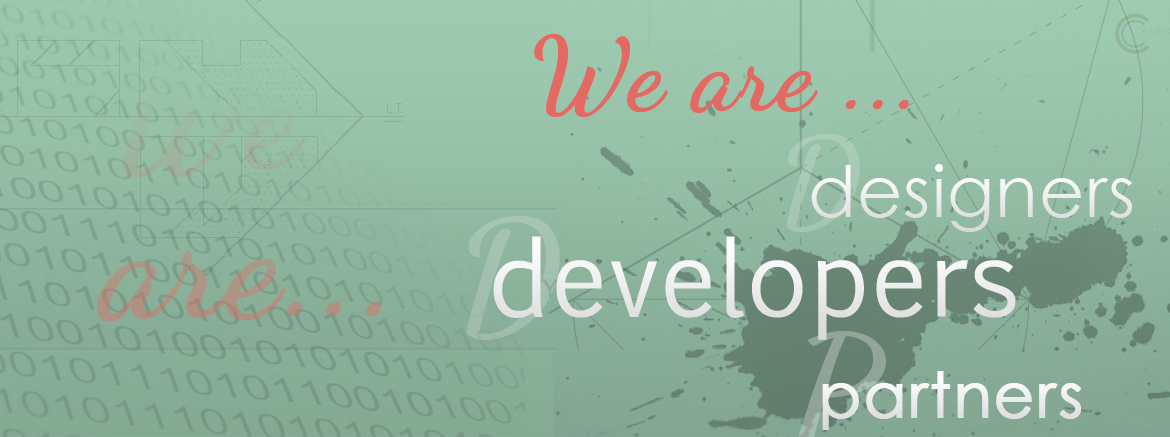
<style>
.page{position:relative;width:1170px;height:437px}
.page>*{position:absolute;margin:0}
.t1{font:103px "DancingScript-Bold";letter-spacing:0.02em;color:#e46963}
.t2{font:154px/30px "DancingScript-Bold";letter-spacing:0.02em}
.t3{font:121.9px "DancingScript-Bold";letter-spacing:0.02em;color:#a8cab6}
.t4{font:71px "CenturyGothic";letter-spacing:0.02em;color:#ffffff}
.t5{font:105px "EuphemiaUCAS";letter-spacing:0.02em;color:#ffffff}
.t6{font:63px "CenturyGothic";letter-spacing:0.02em;color:#ffffff;font-weight:bold}
</style>
<div class="page">
<p class="t1" style="left:534px;top:34px;width:375px;height:83px">We are ...</p>
<p class="t2" style="left:97px;top:53px;width:284px;height:269px">We <br><br><br><br><br>are...</p>
<p class="t3" style="left:786px;top:134px;width:74px;height:98px">D</p>
<p class="t4" style="left:811px;top:164px;width:322px;height:68px">designers</p>
<p class="t5" style="left:493px;top:236px;width:523px;height:104px">developers</p>
<p class="t6" style="left:822px;top:371px;width:259px;height:59px">partners</p>
</div>
